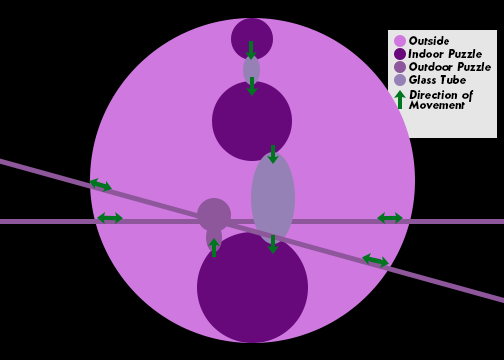
<style>
.page{position:relative;width:504px;height:360px;background:#000000}
.page>*{position:absolute;margin:0}
.t1{font:12px/13px "Semplicita-BoldItalic";letter-spacing:-0.015em;color:#000000;scale:0.9 1}
.t2{font:11.9px/9.9px "Semplicita-BoldItalic";letter-spacing:-0.015em;color:#000000;scale:0.9 1}
</style>
<div class="page">
<p class="t1" style="left:408px;top:36px;width:83px;height:48px">Outside<br>Indoor Puzzle<br>Outdoor Puzzle<br>Glass Tube</p>
<p class="t2" style="left:408px;top:90px;width:66px;height:19px">Direction of <br>Movement</p>
</div>
